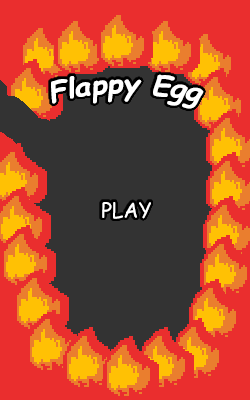
<style>
.page{position:relative;width:250px;height:400px;background:#333333}
.page>*{position:absolute;margin:0}
.t1{font:27.8px "ComicSansMS-BoldItalic";color:#ffffff}
.t2{font:20.8px "ComicSansMS";color:#ffffff}
</style>
<div class="page">
<p class="t1" style="left:51px;top:74px;width:153px;height:35px">Flappy Egg</p>
<p class="t2" style="left:102px;top:202px;width:49px;height:17px">PLAY</p>
</div>
